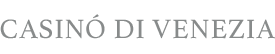
<style>
.page{position:relative;width:275px;height:54px;background:#ffffff}
.page>*{position:absolute;margin:0}
.t1{font:28px "Athelas-Regular";letter-spacing:0.025em;color:#888b8b}
</style>
<div class="page">
<p class="t1" style="left:0px;top:14px;width:275px;height:25px">CASINÓ DI VENEZIA</p>
</div>
